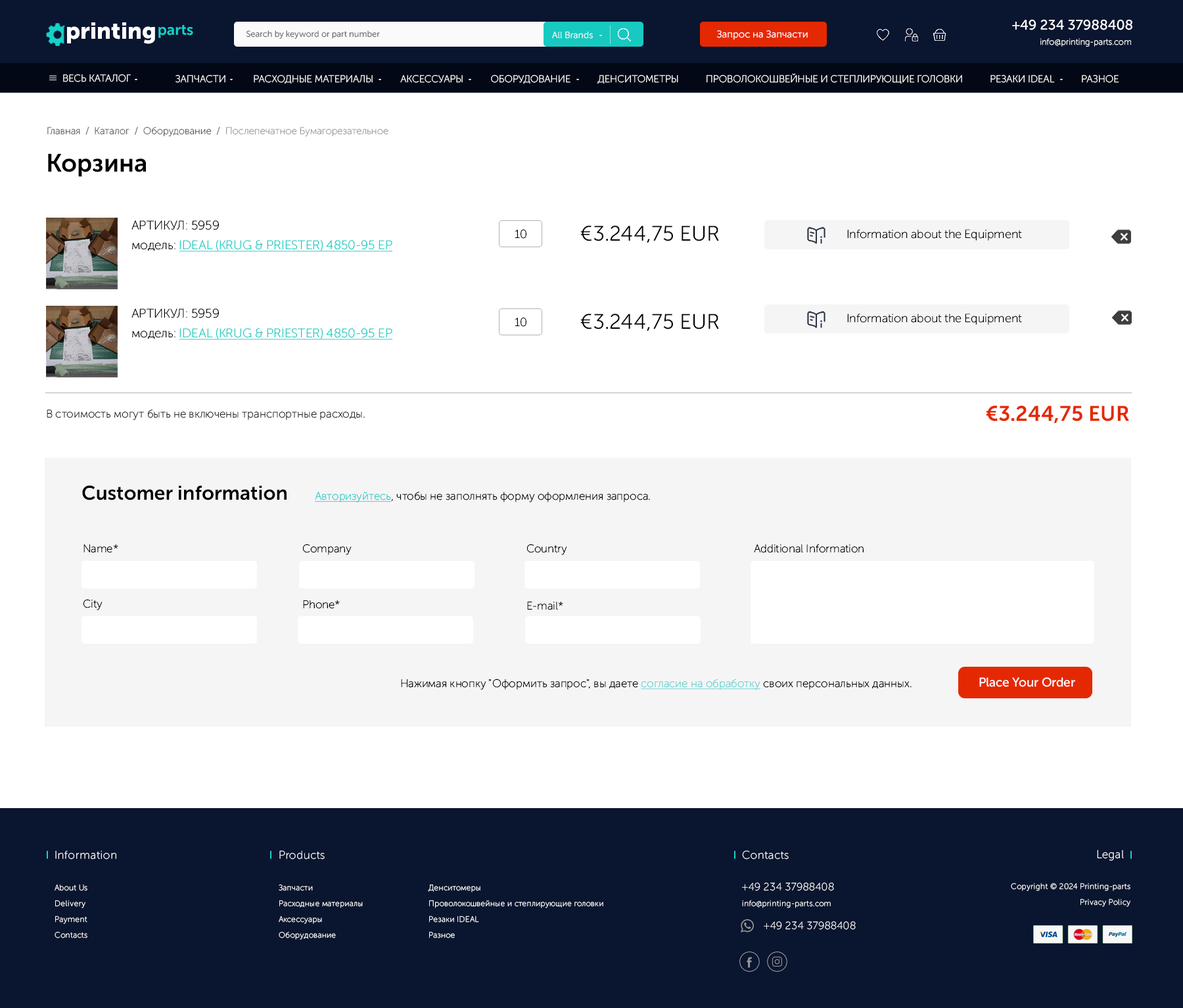
<style>
.page{position:relative;width:1183px;height:1008px;background:#ffffff}
.page>*{position:absolute;margin:0}
.t1{font:23px "MuseoSansCyrl-900";color:#ffffff}
.t2{font:15.1px "MuseoSansCyrl-700";color:#17d1c6}
.t3{font:13.8px "MuseoSansCyrl-500";color:#ffffff}
.t4{font:8.5px "MuseoSansCyrl-300";color:#616161}
.t5{font:9.2px "MuseoSansCyrl-300";color:#ffffff}
.t6{font:9.9px "MuseoSansCyrl-300";color:#ffffff}
.t7{font:8.5px "MuseoSansCyrl-100";color:#ffffff}
.t8{font:9.9px "MuseoSansCyrl-100";color:#ffffff;text-transform:uppercase}
.t9{font:9.9px "MuseoSansCyrl-100";color:#605f5f}
.t10{font:9.9px "MuseoSansCyrl-100";color:#a19d9d}
.t11{font:25px "MuseoSansCyrl-700";color:#000000}
.t12{font:12.5px/19.7px "MuseoSansCyrl-100";color:#17c9c0;text-decoration:underline}
.t13{font:12.5px/19.7px "MuseoSansCyrl-100";color:#000000}
.t14{font:11.8px "MuseoSansCyrl-100";color:#000000}
.t15{font:21px "MuseoSansCyrl-300";color:#000000}
.t16{font:11.2px "MuseoSansCyrl-100";color:#2b2b2b}
.t17{font:21px "MuseoSansCyrl-700";color:#e42902}
.t18{font:19.7px "MuseoSansCyrl-700";color:#000000}
.t19{font:11.2px "MuseoSansCyrl-100";color:#000000}
.t20{font:11.2px "MuseoSansCyrl-100";color:#35cdc5;text-decoration:underline}
.t21{font:12.5px "MuseoSansCyrl-500";color:#ffffff}
.t22{font:11.2px "MuseoSansCyrl-100";color:#66d5ce;text-decoration:underline}
.t23{font:7.9px/15.8px "MuseoSansCyrl-100";letter-spacing:0.025em;color:#ffffff}
.t24{font:11.2px/15.8px "MuseoSansCyrl-100";letter-spacing:0.025em;color:#ffffff}
.t25{font:10.5px/15.8px "MuseoSansCyrl-100";letter-spacing:0.025em;color:#ffffff}
.t26{font:11.2px "MuseoSansCyrl-100";letter-spacing:0.025em;color:#ffffff}
.t27{font:10.5px "MuseoSansCyrl-100";letter-spacing:0.025em;color:#ffffff}
</style>
<div class="page">
<p class="t1" style="left:67px;top:22px;width:88px;height:22px">printing</p>
<p class="t2" style="left:158px;top:25px;width:35px;height:13px">parts</p>
<p class="t3" style="left:1012px;top:19px;width:121px;height:11px">+49 234 37988408</p>
<p class="t4" style="left:247px;top:30px;width:133px;height:9px">Search by keyword or part number</p>
<p class="t5" style="left:552px;top:32px;width:41px;height:7px">All Brands</p>
<p class="t6" style="left:717px;top:30px;width:91px;height:10px">Запрос на Запчасти</p>
<p class="t7" style="left:1041px;top:38px;width:90px;height:9px">info@printing-parts.com</p>
<p class="t8" style="left:63px;top:74px;width:68px;height:8px">Весь каталог</p>
<p class="t8" style="left:176px;top:73px;width:944px;height:11px">Запчасти           Расходные материалы           Аксессуары           Оборудование           Денситометры           Проволокошвейные и степлирующие головки           Резаки IDEAL           Разное</p>
<p class="t9" style="left:47px;top:126px;width:342px;height:11px">Главная  /  Каталог  /  Оборудование  /  <span class="t10">Послепечатное Бумагорезательное</span></p>
<p class="t11" style="left:48px;top:154px;width:98px;height:23px">Корзина</p>
<p class="t12" style="left:131px;top:220px;width:262px;height:32px;text-align:justify"><span class="t13">АРТИКУЛ: 5959<br>модель: </span>IDEAL (KRUG &amp; PRIESTER) 4850-95 EP</p>
<p class="t14" style="left:515px;top:229px;width:12px;height:10px">10</p>
<p class="t15" style="left:580px;top:225px;width:139px;height:18px">€3.244,75 EUR</p>
<p class="t14" style="left:847px;top:229px;width:175px;height:12px">Information about the Equipment</p>
<p class="t12" style="left:131px;top:308px;width:262px;height:32px;text-align:justify"><span class="t13">АРТИКУЛ: 5959<br>модель: </span>IDEAL (KRUG &amp; PRIESTER) 4850-95 EP</p>
<p class="t14" style="left:515px;top:318px;width:12px;height:9px">10</p>
<p class="t15" style="left:580px;top:314px;width:139px;height:17px">€3.244,75 EUR</p>
<p class="t14" style="left:847px;top:314px;width:175px;height:11px">Information about the Equipment</p>
<p class="t16" style="left:47px;top:409px;width:318px;height:11px">В стоимость могут быть не включены транспортные расходы.</p>
<p class="t17" style="left:986px;top:406px;width:143px;height:17px">€3.244,75 EUR</p>
<p class="t18" style="left:82px;top:485px;width:205px;height:15px">Customer information</p>
<p class="t19" style="left:315px;top:491px;width:335px;height:11px"><span class="t20">Авторизуйтесь</span>, чтобы не заполнять форму оформления запроса.</p>
<p class="t19" style="left:83px;top:544px;width:35px;height:9px">Name*</p>
<p class="t19" style="left:302px;top:544px;width:50px;height:11px">Company</p>
<p class="t19" style="left:527px;top:544px;width:40px;height:11px">Country</p>
<p class="t19" style="left:754px;top:544px;width:110px;height:9px">Additional Information</p>
<p class="t19" style="left:83px;top:599px;width:20px;height:11px">City</p>
<p class="t19" style="left:303px;top:600px;width:37px;height:9px">Phone*</p>
<p class="t19" style="left:527px;top:601px;width:36px;height:9px">E-mail*</p>
<p class="t21" style="left:979px;top:677px;width:96px;height:10px">Place Your Order</p>
<p class="t19" style="left:401px;top:678px;width:511px;height:12px">Нажимая кнопку "Оформить запрос", вы даете <span class="t22">согласие на обработку</span> своих персональных данных.</p>
<p class="t23" style="left:55px;top:850px;width:61px;height:88px"><span class="t24">Information<br><br></span>About Us<br>Delivery<br>Payment<br>Contacts</p>
<p class="t23" style="left:279px;top:850px;width:84px;height:89px"><span class="t24">Products<br><br></span>Запчасти<br>Расходные материалы<br>Аксессуары<br>Оборудование</p>
<p class="t23" style="left:742px;top:850px;width:92px;height:58px"><span class="t24">Contacts<br><br></span><span class="t25">+49 234 37988408<br></span>info@printing-parts.com</p>
<p class="t26" style="left:1097px;top:849px;width:27px;height:11px">Legal</p>
<p class="t23" style="left:428px;top:884px;width:175px;height:54px"><span class="t24"><br><br></span>Денситомеры<br>Проволокошвейные и степлирующие головки<br>Резаки IDEAL<br>Разное</p>
<p class="t23" style="left:1011px;top:883px;width:120px;height:24px;text-align:right">Copyright © 2024 Printing-parts<br>Privacy Policy</p>
<p class="t27" style="left:764px;top:921px;width:92px;height:9px">+49 234 37988408</p>
</div>
